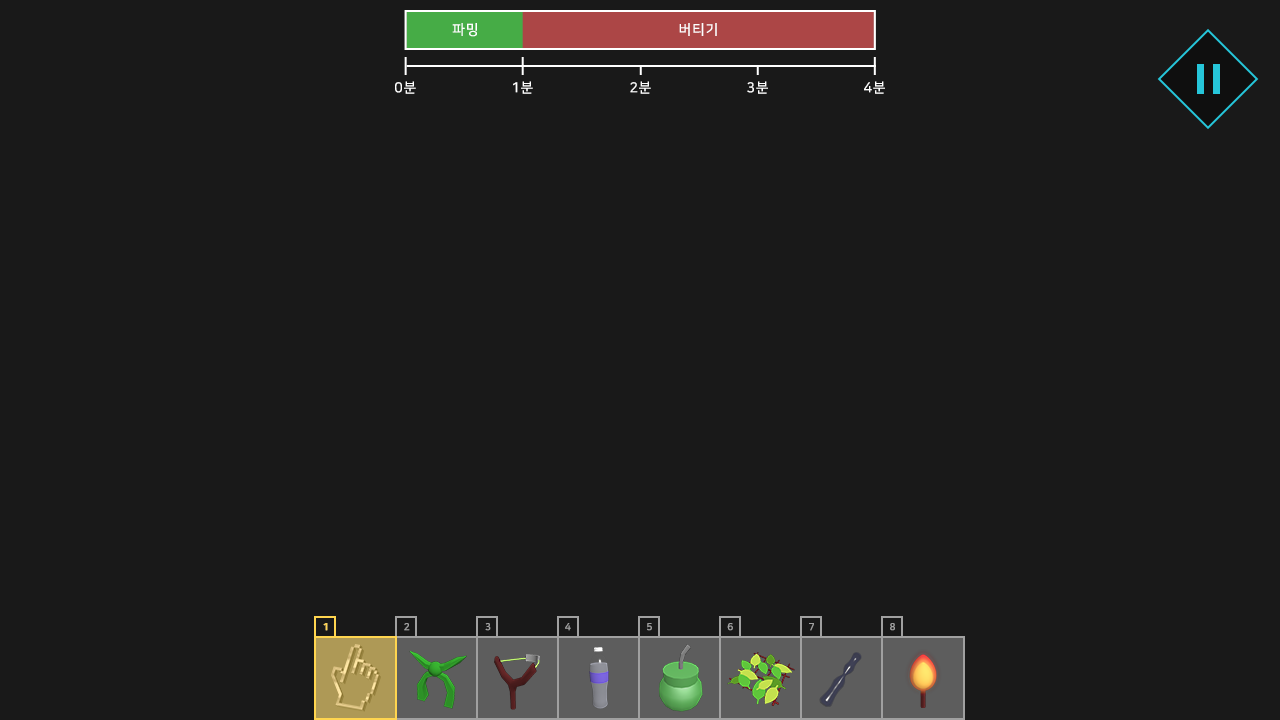
<style>
.page{position:relative;width:1280px;height:720px;background:#191919}
.page>*{position:absolute;margin:0}
.t1{font:14px "NanumSquareB";letter-spacing:0.05em;color:#ffffff}
.t2{font:10.1px "NanumSquareEB";letter-spacing:0.05em;color:#ffd54f}
.t3{font:10.1px "NanumSquareEB";letter-spacing:0.05em;color:#a0a0a0}
</style>
<div class="page">
<p class="t1" style="left:452px;top:23px;width:25px;height:14px">파밍</p>
<p class="t1" style="left:679px;top:23px;width:38px;height:13px">버티기</p>
<p class="t1" style="left:395px;top:81px;width:21px;height:13px">0분</p>
<p class="t1" style="left:513px;top:81px;width:20px;height:13px">1분</p>
<p class="t1" style="left:630px;top:81px;width:21px;height:13px">2분</p>
<p class="t1" style="left:747px;top:81px;width:21px;height:13px">3분</p>
<p class="t1" style="left:864px;top:81px;width:21px;height:13px">4분</p>
<p class="t2" style="left:323px;top:623px;width:5px;height:8px">1</p>
<p class="t2" style="left:323px;top:623px;width:5px;height:8px">1</p>
<p class="t3" style="left:404px;top:623px;width:6px;height:8px">2</p>
<p class="t3" style="left:485px;top:623px;width:6px;height:8px">3</p>
<p class="t3" style="left:565px;top:623px;width:6px;height:8px">4</p>
<p class="t3" style="left:647px;top:623px;width:5px;height:8px">5</p>
<p class="t3" style="left:727px;top:623px;width:6px;height:8px">6</p>
<p class="t3" style="left:809px;top:623px;width:5px;height:8px">7</p>
<p class="t3" style="left:890px;top:623px;width:5px;height:8px">8</p>
</div>
